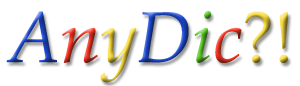
<style>
.page{position:relative;width:300px;height:86px;background:#ffffff}
.page>*{position:absolute;margin:0}
.t1{font:72px "BookAntiqua"}
.t2{font:6px "BookAntiqua-Italic"}
.t3{font:72px "BookAntiqua-Italic"}
</style>
<div class="page">
<p class="t1" style="left:6px;top:11px;width:282px;height:72px"><span class="t2">     </span><span class="t3">A</span><span class="t3">n</span><span class="t3">y</span><span class="t3">D</span><span class="t3">i</span><span class="t3">c</span>?!</p>
</div>
